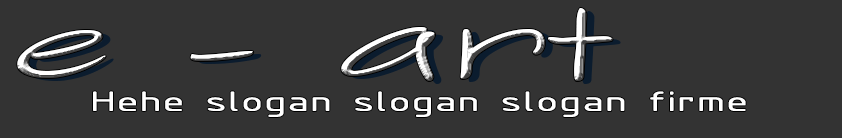
<style>
.page{position:relative;width:842px;height:138px;background:#333333}
.page>*{position:absolute;margin:0}
.t1{font:100px "SketchFlowPrint";scale:1.69 1}
.t2{font:30px "ISOCPEUR";color:#ffffff;scale:1.69 1}
</style>
<div class="page">
<p class="t1" style="left:17px;top:8px;width:596px;height:73px">e - art</p>
<p class="t2" style="left:93px;top:91px;width:653px;height:26px">Hehe slogan slogan slogan firme</p>
</div>
